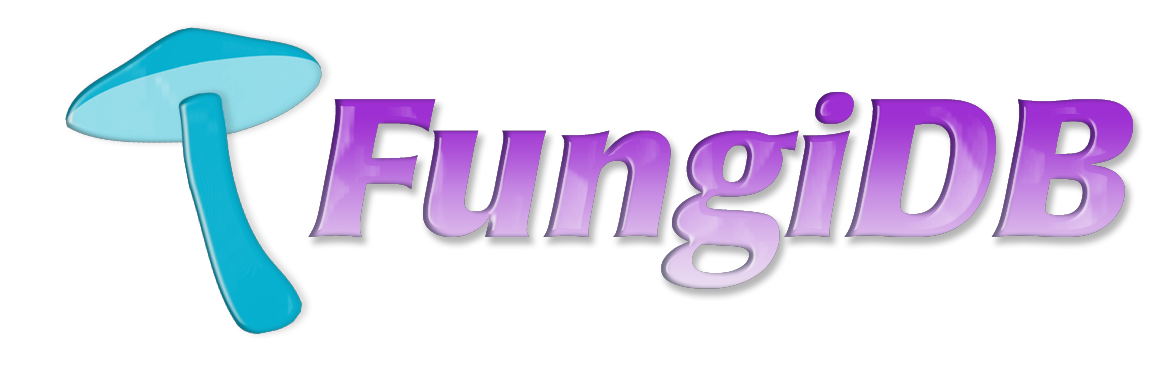
<style>
.page{position:relative;width:1170px;height:376px;background:#ffffff}
.page>*{position:absolute;margin:0}
.t1{font:200px "PopplLaudatio-Bold"}
</style>
<div class="page">
<p class="t1" style="left:308px;top:92px;width:825px;height:197px">FungiDB</p>
</div>
